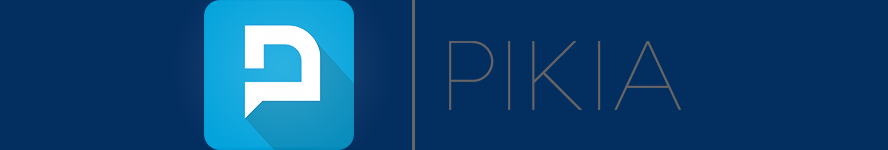
<style>
.page{position:relative;width:888px;height:150px;background:#032e60}
.page>*{position:absolute;margin:0}
.t1{font:92px "SlimJoe";color:#666666}
</style>
<div class="page">
<p class="t1" style="left:449px;top:41px;width:232px;height:69px">Pikia</p>
</div>
